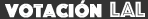
<style>
.page{position:relative;width:148px;height:19px;background:#333333}
.page>*{position:absolute;margin:0}
.t1{font:19.4px "Phosphate-Inline";color:#ffffff;font-weight:bold}
.t2{font:22.9px "Phosphate-Inline";color:#ffffff}
</style>
<div class="page">
<p class="t1" style="left:5px;top:0px;width:97px;height:18px">votación</p>
<p class="t2" style="left:110px;top:1px;width:35px;height:16px">LAL</p>
</div>
